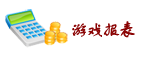
<style>
.page{position:relative;width:142px;height:58px;background:#ffffff}
.page>*{position:absolute;margin:0}
.t1{font:18px "FZSTK--GBK1-0";letter-spacing:-0.14em;color:#8a0303;font-weight:bold}
</style>
<div class="page">
<p class="t1" style="left:72px;top:21px;width:63px;height:17px">游戏报表</p>
</div>
